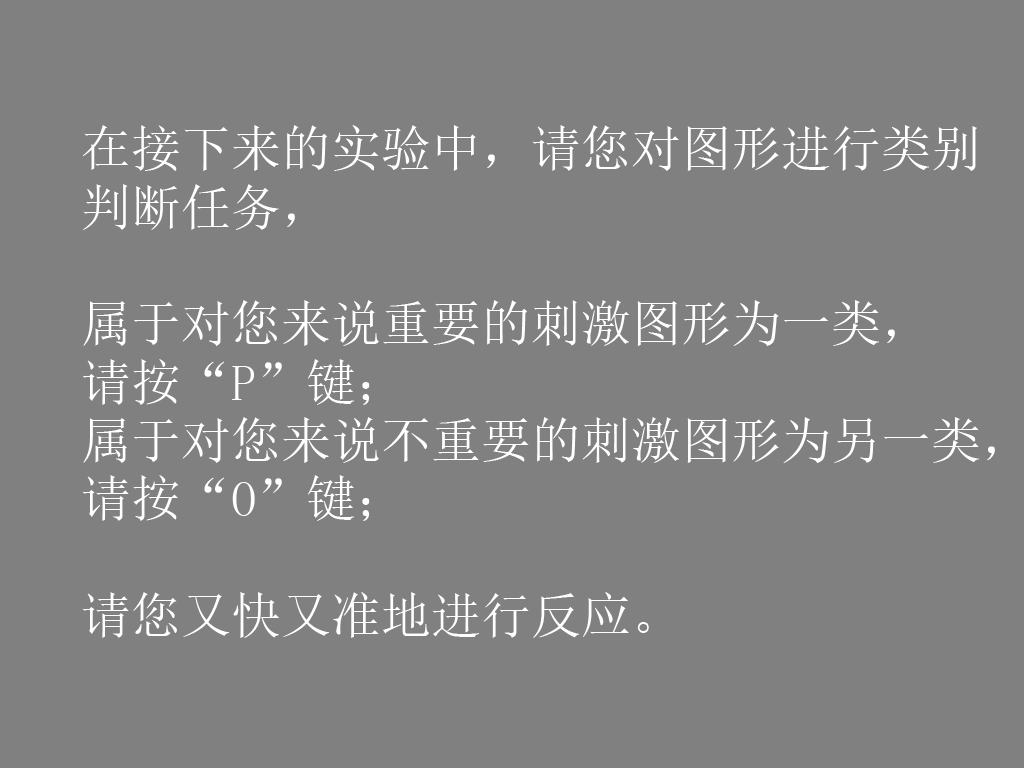
<style>
.page{position:relative;width:1024px;height:768px;background:#808080}
.page>*{position:absolute;margin:0}
.t1{font:50px/58.3px "SimSun";color:#ffffff}
</style>
<div class="page">
<p class="t1" style="left:82px;top:125px;width:913px;height:513px">在接下来的实验中，请您对图形进行类别<br>判断任务，<br><br>属于对您来说重要的刺激图形为一类，<br>请按“P”键；<br>属于对您来说不重要的刺激图形为另一类，<br>请按“O”键；<br><br>请您又快又准地进行反应。</p>
</div>
